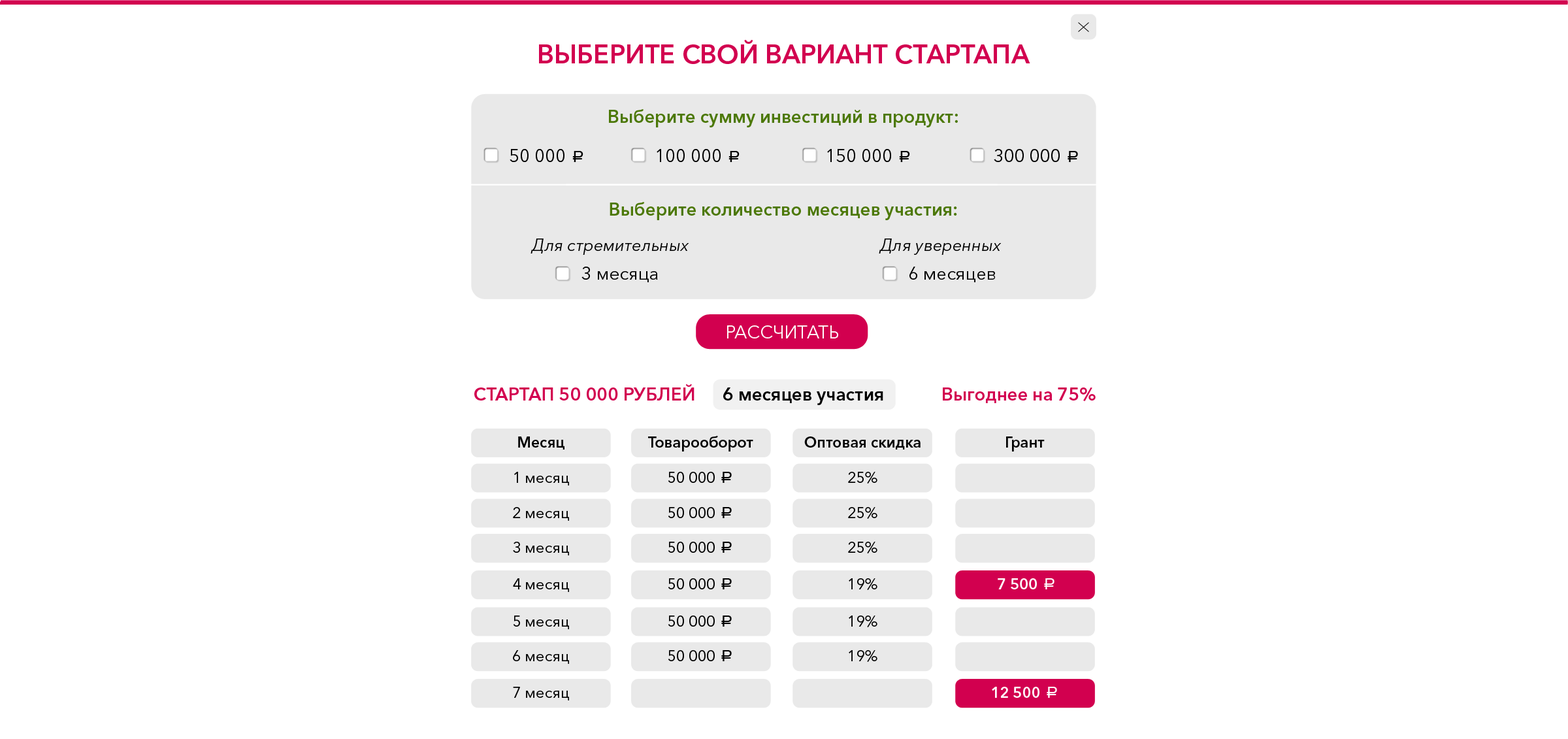
<style>
.page{position:relative;width:1568px;height:739px;background:#ffffff}
.page>*{position:absolute;margin:0}
.t1{font:26px "AvenirNextCyr-Demi";color:#d2004f;text-transform:uppercase}
.t2{font:18.1px "AvenirNextCyr-Demi";color:#4c7807}
.t3{font:18.1px "AvenirNextCyr-Regular";color:#000000}
.t4{font:16.6px "ALSRubl";color:#000000}
.t5{font:16.6px "AvenirNextCyr-Italic";color:#000000}
.t6{font:18.1px "AvenirNextCyr-Regular";color:#ffffff;text-transform:uppercase}
.t7{font:18.1px "AvenirNextCyr-Demi";color:#d2004f}
.t8{font:18.1px "AvenirNextCyr-Demi";color:#000000}
.t9{font:15.2px "AvenirNextCyr-Demi";color:#000000}
.t10{font:15.2px "AvenirNextCyr-Regular";color:#000000}
.t11{font:15.2px "AvenirNextCyr-Demi";color:#fefefe}
.t12{font:16.6px "ALSRubl";color:#fefefe}
.t13{font:15.2px "AvenirNextCyr-Demi";color:#ffffff}
.t14{font:16.6px "ALSRubl";color:#ffffff}
</style>
<div class="page">
<p class="t1" style="left:539px;top:40px;width:491px;height:24px">Выберите свой вариант стартапа</p>
<p class="t2" style="left:609px;top:109px;width:349px;height:18px">Выберите сумму инвестиций в продукт:</p>
<p class="t3" style="left:510px;top:149px;width:73px;height:13px">50 000 <span class="t4">a</span></p>
<p class="t3" style="left:657px;top:149px;width:83px;height:13px">100 000 <span class="t4">a</span></p>
<p class="t3" style="left:827px;top:149px;width:83px;height:13px">150 000 <span class="t4">a</span></p>
<p class="t3" style="left:994px;top:149px;width:84px;height:13px">300 000 <span class="t4">a</span></p>
<p class="t2" style="left:610px;top:202px;width:347px;height:18px">Выберите количество месяцев участия:</p>
<p class="t5" style="left:531px;top:238px;width:158px;height:17px">Для стремительных</p>
<p class="t5" style="left:879px;top:238px;width:123px;height:17px">Для уверенных</p>
<p class="t3" style="left:581px;top:267px;width:77px;height:15px">3 месяца</p>
<p class="t3" style="left:909px;top:267px;width:86px;height:15px">6 месяцев</p>
<p class="t6" style="left:727px;top:325px;width:111px;height:13px">Рассчитать</p>
<p class="t7" style="left:474px;top:384px;width:409px;height:21px">СТАРТАП 50 000 РУБЛЕЙ <span class="t8">     6 месяцев участия</span></p>
<p class="t7" style="left:943px;top:387px;width:153px;height:16px">Выгоднее на 75%</p>
<p class="t9" style="left:518px;top:436px;width:46px;height:13px">Месяц</p>
<p class="t9" style="left:648px;top:436px;width:105px;height:15px">Товарооборот</p>
<p class="t9" style="left:804px;top:436px;width:117px;height:13px">Оптовая скидка</p>
<p class="t9" style="left:1006px;top:436px;width:39px;height:15px">Грант</p>
<p class="t10" style="left:514px;top:472px;width:55px;height:13px">1 месяц</p>
<p class="t10" style="left:668px;top:472px;width:64px;height:11px">50 000 <span class="t4">a</span></p>
<p class="t10" style="left:848px;top:472px;width:29px;height:11px">25%</p>
<p class="t10" style="left:513px;top:507px;width:56px;height:14px">2 месяц</p>
<p class="t10" style="left:668px;top:507px;width:64px;height:11px">50 000 <span class="t4">a</span></p>
<p class="t10" style="left:848px;top:507px;width:29px;height:12px">25%</p>
<p class="t10" style="left:513px;top:542px;width:56px;height:13px">3 месяц</p>
<p class="t10" style="left:668px;top:542px;width:64px;height:11px">50 000 <span class="t4">a</span></p>
<p class="t10" style="left:848px;top:542px;width:29px;height:11px">25%</p>
<p class="t10" style="left:513px;top:578px;width:56px;height:14px">4 месяц</p>
<p class="t10" style="left:668px;top:578px;width:64px;height:11px">50 000 <span class="t4">a</span></p>
<p class="t10" style="left:849px;top:578px;width:28px;height:12px">19%</p>
<p class="t11" style="left:998px;top:578px;width:56px;height:11px">7 500 <span class="t12">a</span></p>
<p class="t10" style="left:513px;top:615px;width:56px;height:14px">5 месяц</p>
<p class="t10" style="left:668px;top:615px;width:64px;height:12px">50 000 <span class="t4">a</span></p>
<p class="t10" style="left:849px;top:615px;width:28px;height:12px">19%</p>
<p class="t10" style="left:513px;top:650px;width:56px;height:14px">6 месяц</p>
<p class="t10" style="left:668px;top:650px;width:64px;height:11px">50 000 <span class="t4">a</span></p>
<p class="t10" style="left:849px;top:650px;width:28px;height:12px">19%</p>
<p class="t10" style="left:513px;top:687px;width:56px;height:13px">7 месяц</p>
<p class="t13" style="left:992px;top:687px;width:65px;height:11px">12 500 <span class="t14">a</span></p>
</div>
